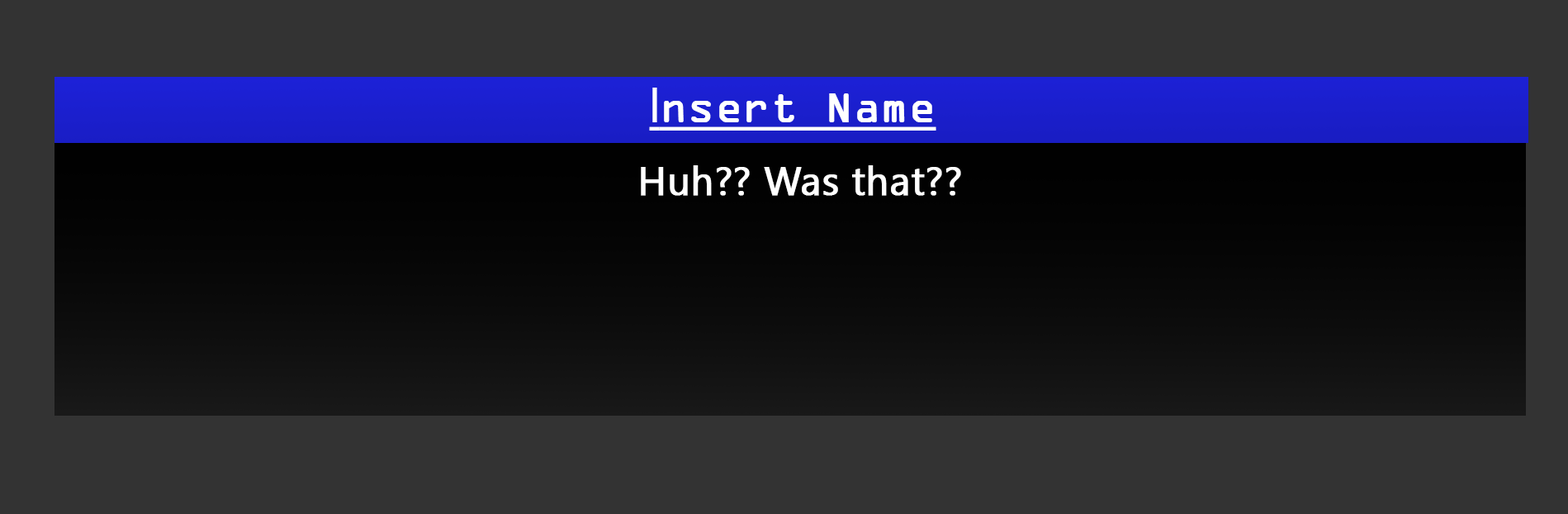
<style>
.page{position:relative;width:1568px;height:514px;background:#333333}
.page>*{position:absolute;margin:0}
.t1{font:75.1px "OCRAExtended";color:#ffffff;font-weight:bold;text-decoration:underline}
.t2{font:75.1px "AgencyFB-Reg";color:#ffffff;font-weight:bold;text-decoration:underline}
.t3{font:39.6px "SegoeUI";color:#ffffff;font-weight:bold}
</style>
<div class="page">
<p class="t1" style="left:649px;top:88px;width:287px;height:42px"><span class="t2">I</span>nsert Name</p>
<p class="t3" style="left:641px;top:165px;width:320px;height:31px">Huh?? Was that??</p>
</div>
